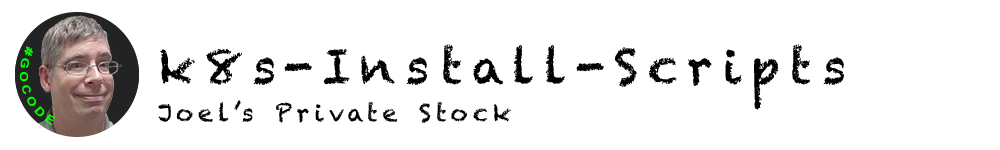
<style>
.page{position:relative;width:1000px;height:150px;background:#ffffff}
.page>*{position:absolute;margin:0}
.t1{font:11.2px "Arial-BoldMT";letter-spacing:0.2em;color:#00ff00}
.t2{font:48px "Chalkduster";letter-spacing:0.2em;color:#000000}
.t3{font:24px "Chalkduster";letter-spacing:0.2em;color:#000000}
</style>
<div class="page">
<p class="t1" style="left:19px;top:46px;width:37px;height:80px;rotate:72deg">#GOCODE</p>
<p class="t2" style="left:160px;top:44px;width:684px;height:66px">k8s-Install-Scripts</p>
<p class="t3" style="left:158px;top:100px;width:353px;height:23px">Joel’s Private Stock</p>
</div>
